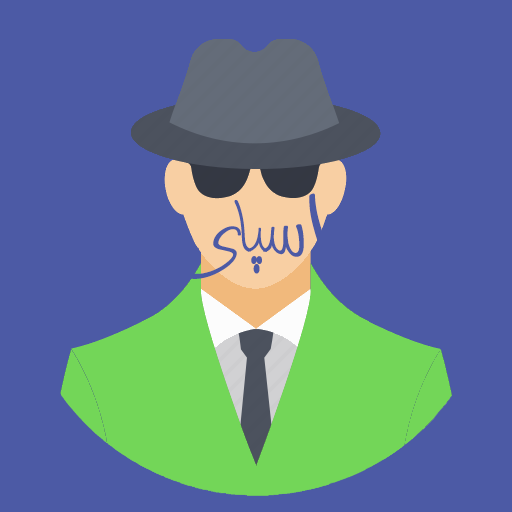
<style>
.page{position:relative;width:512px;height:512px;background:#4c5aa5}
.page>*{position:absolute;margin:0}
.t1{font:117.2px "Ziba";letter-spacing:-0.047em;color:#4c5aa5}
</style>
<div class="page">
<p class="t1" style="left:181px;top:193px;width:148px;height:86px">اسپای</p>
</div>
